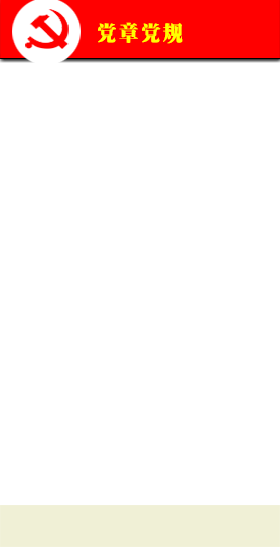
<style>
.page{position:relative;width:280px;height:547px;background:#ffffff}
.page>*{position:absolute;margin:0}
.t1{font:22.2px "RS_CuBiao";letter-spacing:0.05em;color:#ffff00;scale:0.94 1}
</style>
<div class="page">
<p class="t1" style="left:98px;top:22px;width:85px;height:22px">党章党规</p>
</div>
